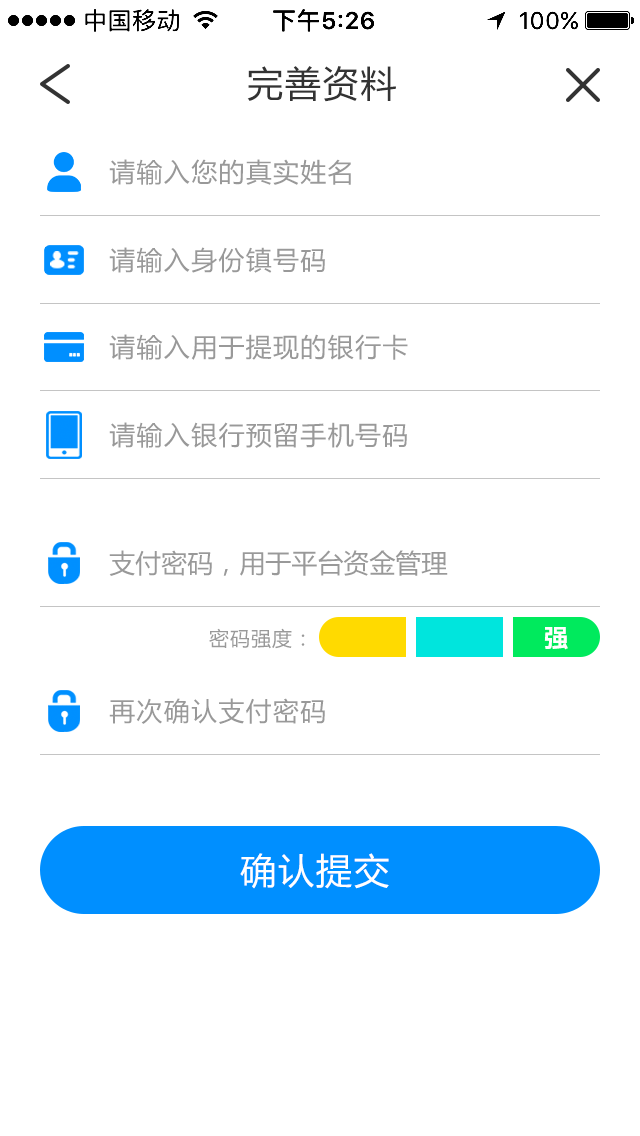
<style>
.page{position:relative;width:640px;height:1136px;background:#ffffff}
.page>*{position:absolute;margin:0}
.t1{font:36px "MicrosoftYaHei";letter-spacing:0.05em;color:#333333}
.t2{font:26px "MicrosoftYaHei";letter-spacing:0.05em;color:#999999}
.t3{font:26px "MicrosoftYaHei";color:#999999}
.t4{font:20px "MicrosoftYaHei";letter-spacing:0.05em;color:#999999}
.t5{font:24px "MicrosoftYaHei-Bold";letter-spacing:0.05em;color:#ffffff}
.t6{font:36px "MicrosoftYaHei";letter-spacing:0.05em;color:#ffffff}
</style>
<div class="page">
<p class="t1" style="left:247px;top:66px;width:149px;height:36px">完善资料</p>
<p class="t2" style="left:109px;top:159px;width:242px;height:26px">请输入您的真实姓名</p>
<p class="t2" style="left:109px;top:247px;width:216px;height:26px">请输入身份镇号码</p>
<p class="t2" style="left:109px;top:334px;width:299px;height:26px">请输入用于提现的银行卡</p>
<p class="t2" style="left:109px;top:422px;width:298px;height:26px">请输入银行预留手机号码</p>
<p class="t3" style="left:109px;top:550px;width:339px;height:26px">支付密码，用于平台资金管理</p>
<p class="t4" style="left:209px;top:628px;width:96px;height:21px">密码强度：</p>
<p class="t5" style="left:544px;top:627px;width:24px;height:23px">强</p>
<p class="t2" style="left:109px;top:698px;width:216px;height:26px">再次确认支付密码</p>
<p class="t6" style="left:240px;top:853px;width:149px;height:36px">确认提交</p>
</div>
